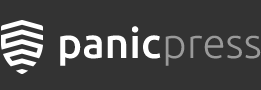
<style>
.page{position:relative;width:261px;height:90px;background:#333333}
.page>*{position:absolute;margin:0}
.t1{font:42.2px "Ubuntu-Medium";color:#ffffff}
.t2{font:42.2px "Ubuntu-Light";color:#9a9a9a}
</style>
<div class="page">
<p class="t1" style="left:60px;top:26px;width:101px;height:40px">panic</p>
<p class="t2" style="left:165px;top:35px;width:96px;height:31px">press</p>
</div>
